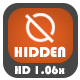
<style>
.page{position:relative;width:80px;height:80px;background:#464646}
.page>*{position:absolute;margin:0}
.t1{font:15px "Bauhaus93";color:#ffffff}
.t2{font:12px "Bauhaus93";color:#ffffff}
</style>
<div class="page">
<p class="t1" style="left:14px;top:46px;width:52px;height:11px">HIDDEN</p>
<p class="t2" style="left:15px;top:65px;width:50px;height:10px">HD 1.06x</p>
</div>
